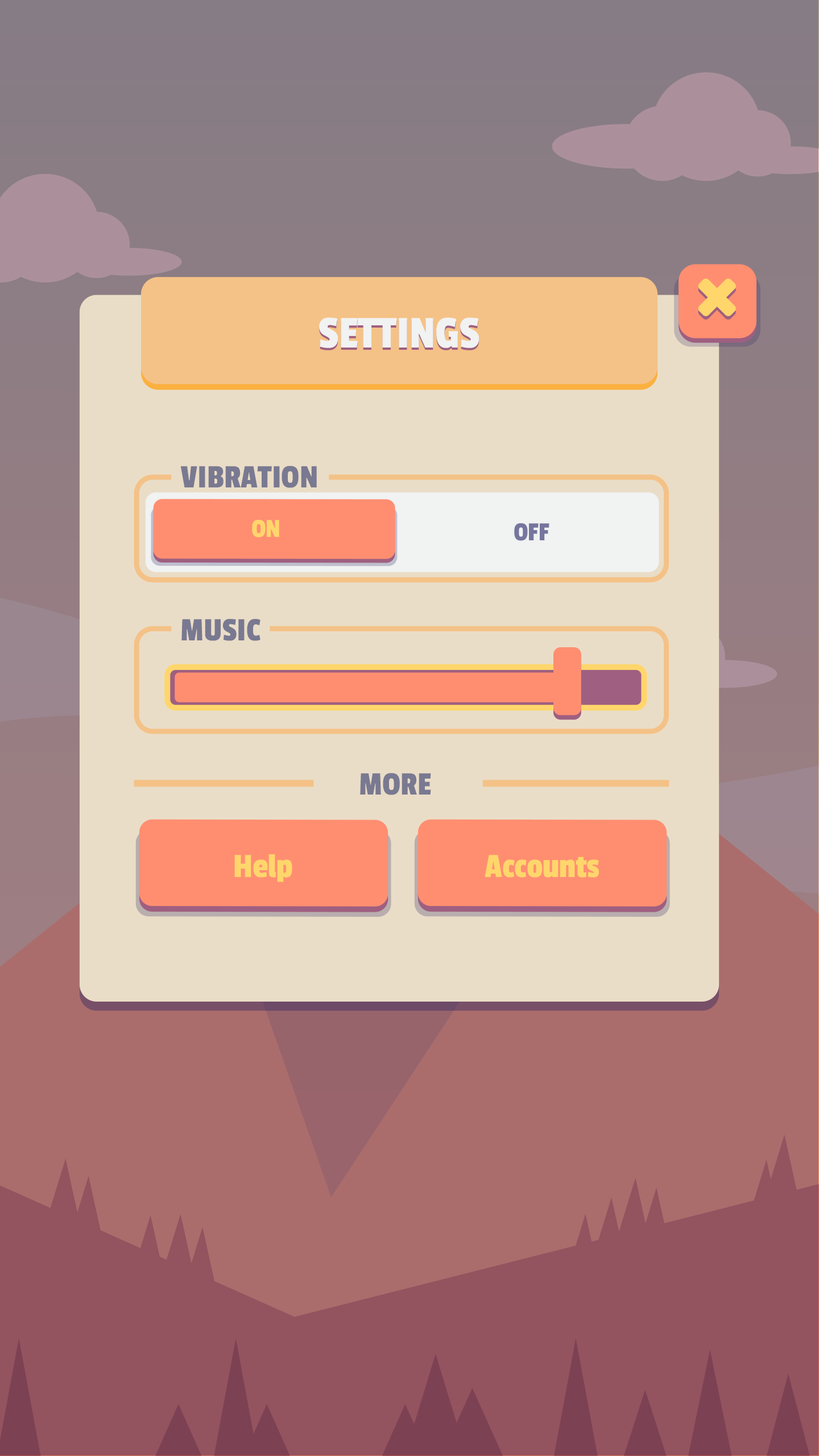
<style>
.page{position:relative;width:819px;height:1456px;background:#eaddc7}
.page>*{position:absolute;margin:0}
.t1{font:47.2px "PassionOne-Regular";color:#ffffff}
.t2{font:47.2px "PassionOne-Regular";color:#f1f2f2}
.t3{font:34.1px "PassionOne-Regular";color:#797991}
.t4{font:27.1px "PassionOne-Regular";color:#ffd66b}
.t5{font:27.1px "PassionOne-Regular";color:#75759e}
.t6{font:35.4px "PassionOne-Regular";color:#ffd66b}
</style>
<div class="page">
<p class="t1" style="left:319px;top:317px;width:160px;height:31px">SETTINGS</p>
<p class="t2" style="left:319px;top:317px;width:160px;height:31px">SETTINGS</p>
<p class="t2" style="left:319px;top:320px;width:160px;height:30px">SETTINGS</p>
<p class="t3" style="left:180px;top:466px;width:137px;height:22px">VIBRATION</p>
<p class="t4" style="left:252px;top:519px;width:27px;height:18px">ON</p>
<p class="t5" style="left:514px;top:523px;width:35px;height:18px">OFF</p>
<p class="t3" style="left:181px;top:619px;width:79px;height:22px">MUSIC</p>
<p class="t3" style="left:360px;top:773px;width:71px;height:22px">MORE</p>
<p class="t6" style="left:234px;top:854px;width:58px;height:28px">Help</p>
<p class="t6" style="left:485px;top:855px;width:114px;height:23px">Accounts</p>
</div>
